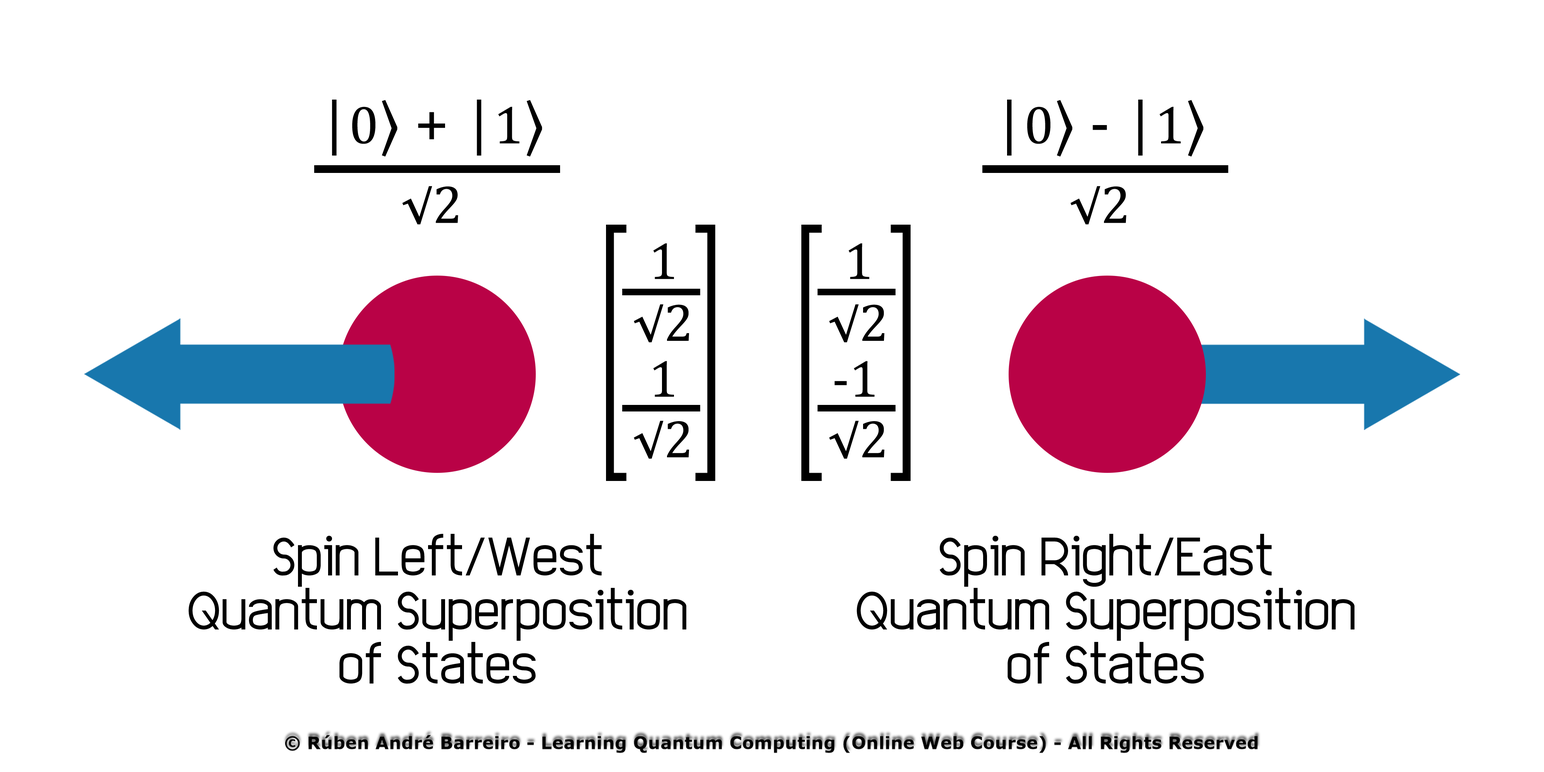
<style>
.page{position:relative;width:1544px;height:772px;background:#ffffff}
.page>*{position:absolute;margin:0}
.t1{font:61.8px "Cambria";color:#000000}
.t2{font:61.8px "SitkaSmall-Italic";color:#000000}
.t3{font:54.1px "Cambria";color:#000000}
.t4{font:54.1px "SitkaSmall-Italic";color:#000000}
.t5{font:52.6px "Cambria";color:#000000}
.t6{font:53.5px "SitkaSmall-Italic";color:#000000}
.t7{font:53.5px "Cambria";color:#000000}
.t8{font:38.6px/54.1px "EleganTech";color:#000000}
</style>
<div class="page">
<p class="t1" style="left:332px;top:100px;width:210px;height:57px"><span class="t2">|</span><span class="t3">0</span>⟩ + <span class="t2">|</span><span class="t3">1</span>⟩</p>
<p class="t1" style="left:1007px;top:100px;width:197px;height:57px"><span class="t2">|</span><span class="t3">0</span>⟩ - <span class="t2">|</span><span class="t3">1</span>⟩</p>
<p class="t4" style="left:402px;top:186px;width:56px;height:39px">√<span class="t3">2</span></p>
<p class="t4" style="left:1071px;top:186px;width:56px;height:39px">√<span class="t3">2</span></p>
<p class="t5" style="left:653px;top:243px;width:21px;height:36px">1</p>
<p class="t5" style="left:849px;top:243px;width:20px;height:36px">1</p>
<p class="t6" style="left:634px;top:304px;width:55px;height:38px">√<span class="t7">2</span></p>
<p class="t6" style="left:829px;top:304px;width:55px;height:38px">√<span class="t7">2</span></p>
<p class="t5" style="left:653px;top:361px;width:21px;height:36px">1</p>
<p class="t5" style="left:835px;top:361px;width:40px;height:36px">-1</p>
<p class="t6" style="left:634px;top:421px;width:55px;height:38px">√<span class="t7">2</span></p>
<p class="t6" style="left:829px;top:421px;width:55px;height:38px">√<span class="t7">2</span></p>
<p class="t8" style="left:188px;top:534px;width:498px;height:150px;text-align:center">Spin Left/West<br>Quantum Superposition of States</p>
<p class="t8" style="left:857px;top:534px;width:498px;height:150px;text-align:center">Spin Right/East<br>Quantum Superposition of States</p>
</div>
